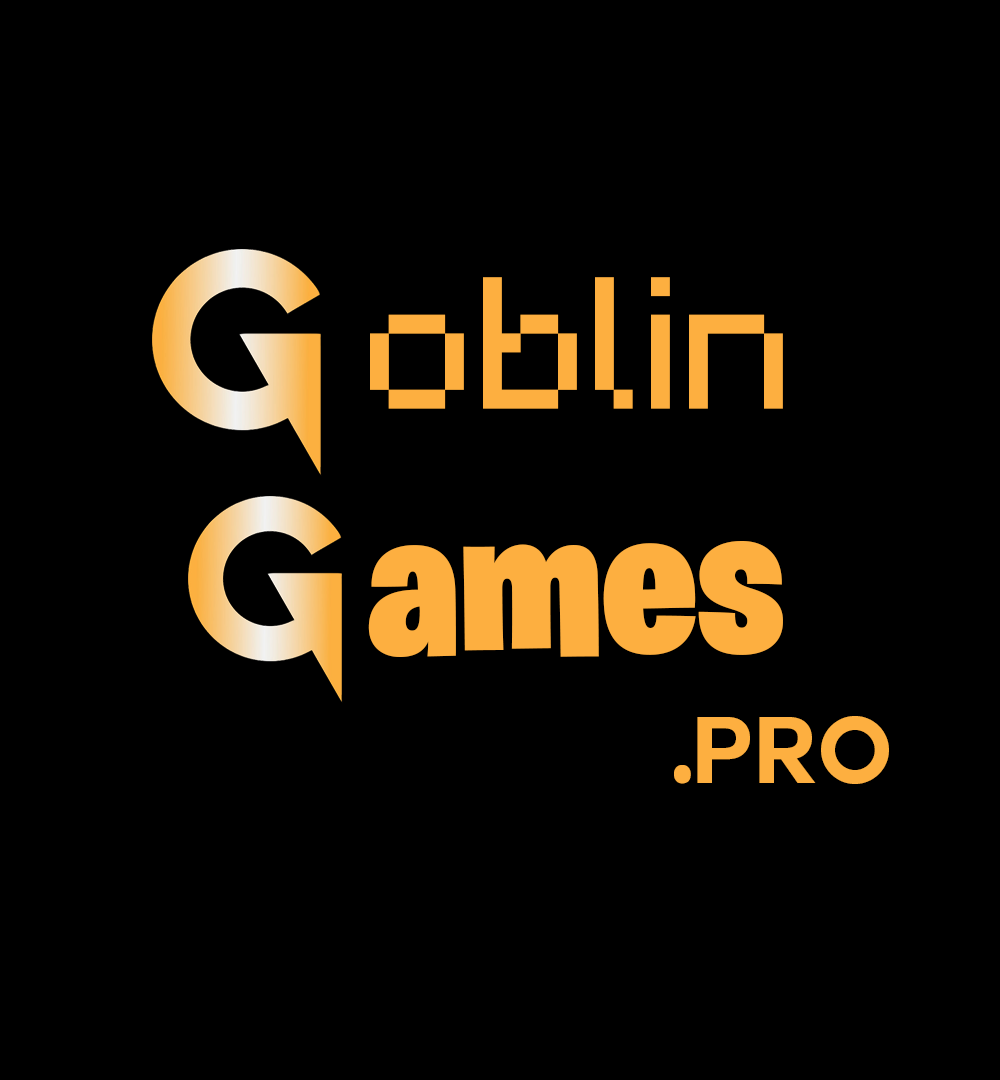
<style>
.page{position:relative;width:1000px;height:1080px;background:#000000}
.page>*{position:absolute;margin:0}
.t1{font:150px "Minecraft";color:#fdaf40}
.t2{font:215.7px "BurbankBigCondensed-Black";color:#fdaf40}
.t3{font:92px "Couture-Bold";color:#fdaf40}
.t4{font:92px "BurbankBigCondensed-Black";color:#fdaf40}
</style>
<div class="page">
<p class="t1" style="left:370px;top:277px;width:413px;height:132px">oblin</p>
<p class="t2" style="left:368px;top:541px;width:415px;height:116px">ames</p>
<p class="t3" style="left:674px;top:716px;width:215px;height:68px"><span class="t4">.</span>pro</p>
</div>
